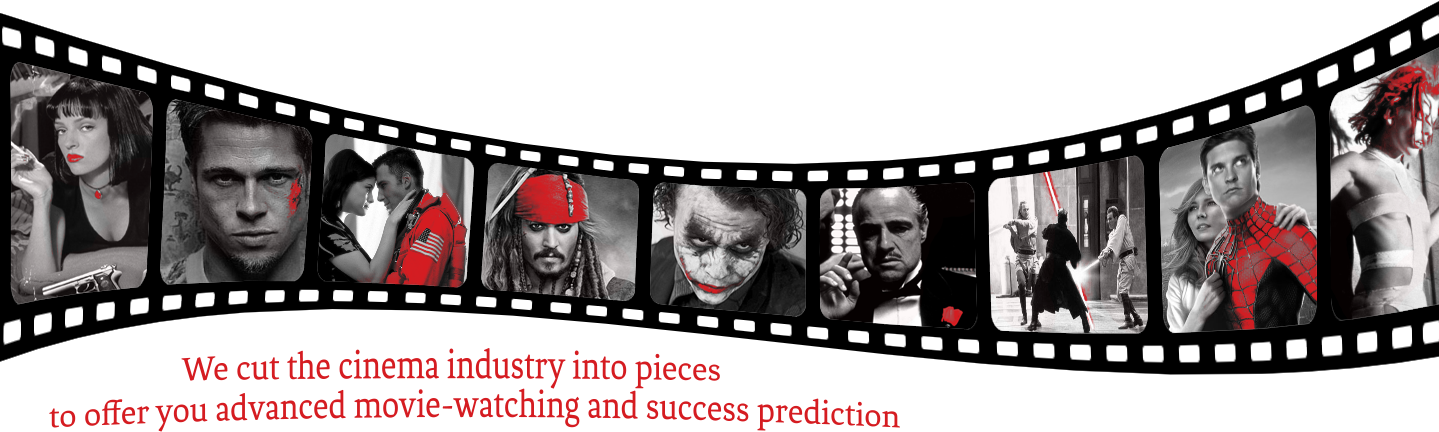
<style>
.page{position:relative;width:1439px;height:432px;background:#ffffff}
.page>*{position:absolute;margin:0}
.t1{font:34px "Fenix";color:#d51c21}
</style>
<div class="page">
<p class="t1" style="left:181px;top:348px;width:539px;height:41px">We cut the cinema industry into pieces</p>
<p class="t1" style="left:49px;top:388px;width:851px;height:44px">to offer you advanced movie-watching and success prediction</p>
</div>
